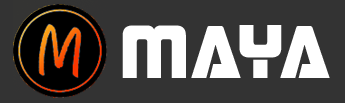
<style>
.page{position:relative;width:345px;height:103px;background:#333333}
.page>*{position:absolute;margin:0}
.t1{font:75px "Stormfaze-Regular";color:#ffffff}
</style>
<div class="page">
<p class="t1" style="left:122px;top:25px;width:208px;height:53px">MAYA</p>
</div>
